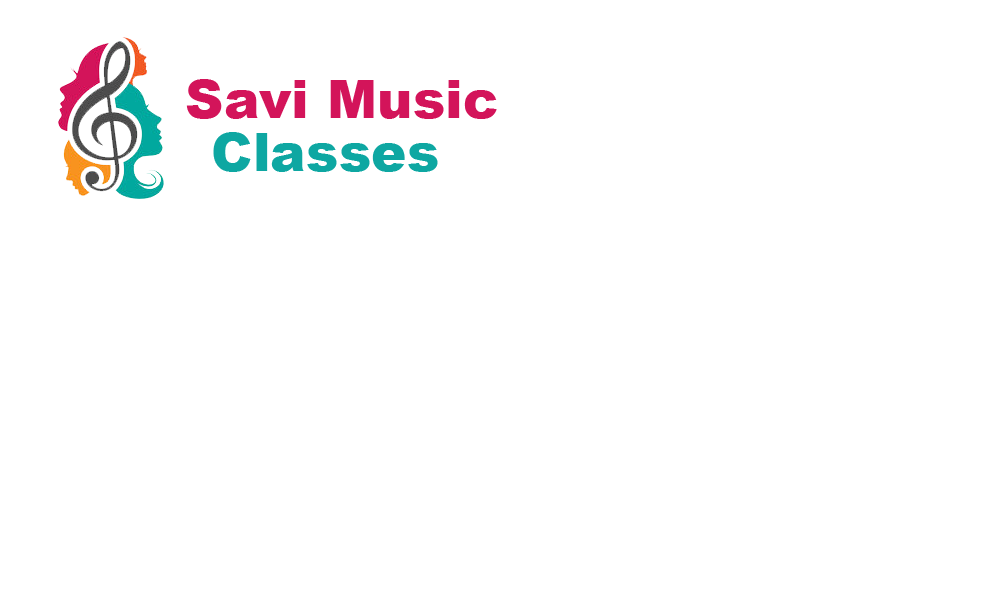
<style>
.page{position:relative;width:1000px;height:600px;background:#ffffff}
.page>*{position:absolute;margin:0}
.t1{font:53.3px "Arial-Black";color:#d3145a}
.t2{font:53.3px "Arial-Black";color:#0ea7a2}
</style>
<div class="page">
<p class="t1" style="left:186px;top:79px;width:311px;height:40px">Savi Music</p>
<p class="t2" style="left:213px;top:132px;width:225px;height:40px">Classes</p>
</div>
